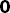
<style>
.page{position:relative;width:10px;height:13px;background:#000000}
.page>*{position:absolute;margin:0}
.t1{font:20px "MyriadPro-Bold";color:#000000}
</style>
<div class="page">
<p class="t1" style="left:0px;top:0px;width:10px;height:13px">0</p>
</div>
